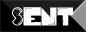
<style>
.page{position:relative;width:86px;height:32px;background:#000000}
.page>*{position:absolute;margin:0}
.t1{font:18px "PacFont";color:#ffffff}
</style>
<div class="page">
<p class="t1" style="left:12px;top:7px;width:62px;height:19px">Sent</p>
</div>
